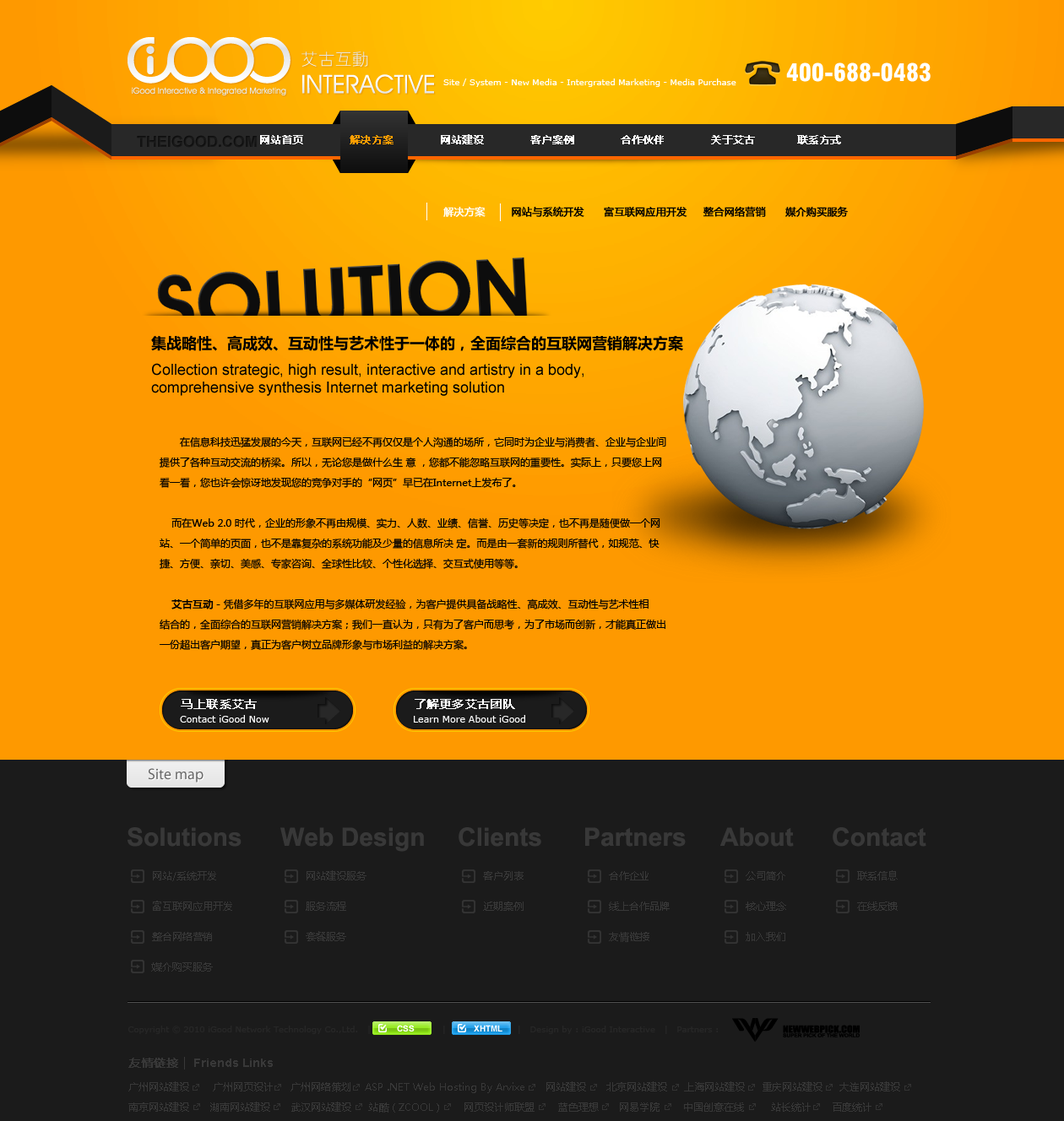
<style>
.page{position:relative;width:1064px;height:1121px;background:#1b1b1b}
.page>*{position:absolute;margin:0}
.t1{font:23.6px "Swiss721BT-BlackCondensed";color:#ffffff}
.t2{font:8.4px "Verdana";color:#ffffff}
.t3{font:10.1px "MicrosoftYaHei";color:#ffffff;font-weight:bold}
.t4{font:10.1px "MicrosoftYaHei";color:#ff9e01;font-weight:bold}
.t5{font:10.1px "MicrosoftYaHei";color:#000000;font-weight:bold}
.t6{font:10.1px/20.3px "MicrosoftYaHei";color:#000000}
.t7{font:10.1px/20.3px "SimSun";color:#000000}
.t8{font:10.1px/20.3px "MicrosoftYaHei";color:#000000;font-weight:bold}
.t9{font:11.8px "MicrosoftYaHei";color:#ffffff;font-weight:bold}
.t10{font:9.3px "Verdana";color:#ffffff}
.t11{font:25.3px "Arial-BoldMT";color:#383838}
.t12{font:10.1px/30.4px "MicrosoftYaHei";color:#383838}
.t13{font:11.8px "MicrosoftYaHei";color:#383838;font-weight:bold}
.t14{font:11.8px "MicrosoftYaHei";color:#383838}
.t15{font:11.8px "Arial-BoldMT";color:#383838}
.t16{font:10.1px/20.3px "MicrosoftYaHei";color:#383838}
</style>
<div class="page">
<p class="t1" style="left:786px;top:62px;width:144px;height:20px">400-688-0483</p>
<p class="t2" style="left:443px;top:79px;width:293px;height:8px">Site / System - New Media - Intergrated Marketing - Media Purchase</p>
<p class="t3" style="left:260px;top:134px;width:581px;height:10px">网站首页           <span class="t4">解决方案 </span>          网站建设           客户案例           合作伙伴           关于艾古          联系方式</p>
<p class="t5" style="left:443px;top:206px;width:405px;height:11px"><span class="t3">解决方案        </span>网站与系统开发      富互联网应用开发     整合网络营销      媒介购买服务</p>
<p class="t6" style="left:160px;top:436px;width:506px;height:214px"><span class="t7">    </span>在信息科技迅猛发展的今天，互联网已经不再仅仅是个人沟通的场所，它同时为企业与消费者、企业与企业间<br>提供了各种互动交流的桥梁。所以，无论您是做什么生 意 ，您都不能忽略互联网的重要性。实际上，只要您上网<br>看一看，您也许会惊讶地发现您的竞争对手的“网页”早已在Internet上发布了。<br><br>    而在Web 2.0 时代，企业的形象不再由规模、实力、人数、业绩、信誉、历史等决定，也不再是随便做一个网<br>站、一个简单的页面，也不是靠复杂的系统功能及少量的信息所决 定。而是由一套新的规则所替代，如规范、快<br>捷、方便、亲切、美感、专家咨询、全球性比较、个性化选择、交互式使用等等。<br><br>    <span class="t8">艾古互动</span>－凭借多年的互联网应用与多媒体研发经验，为客户提供具备战略性、高成效、互动性与艺术性相<br>结合的，全面综合的互联网营销解决方案；我们一直认为，只有为了客户而思考，为了市场而创新，才能真正做出<br>一份超出客户期望，真正为客户树立品牌形象与市场利益的解决方案。</p>
<p class="t9" style="left:181px;top:699px;width:76px;height:10px">马上联系艾古</p>
<p class="t9" style="left:414px;top:699px;width:101px;height:10px">了解更多艾古团队</p>
<p class="t10" style="left:180px;top:715px;width:89px;height:8px">Contact iGood Now</p>
<p class="t10" style="left:414px;top:715px;width:111px;height:8px">Learn More About iGood</p>
<p class="t11" style="left:127px;top:827px;width:114px;height:20px">Solutions</p>
<p class="t11" style="left:280px;top:827px;width:144px;height:25px">Web Design</p>
<p class="t11" style="left:458px;top:827px;width:83px;height:20px">Clients</p>
<p class="t11" style="left:585px;top:827px;width:100px;height:20px">Partners</p>
<p class="t11" style="left:720px;top:827px;width:74px;height:20px">About</p>
<p class="t11" style="left:832px;top:827px;width:94px;height:20px">Contact</p>
<p class="t12" style="left:151px;top:871px;width:81px;height:101px">网站/系统开发 <br>富互联网应用开发 <br>整合网络营销 <br>媒介购买服务</p>
<p class="t12" style="left:306px;top:870px;width:60px;height:71px">网站建设服务 <br>服务流程 <br>套餐服务</p>
<p class="t12" style="left:483px;top:871px;width:40px;height:40px">客户列表 <br>近期案例</p>
<p class="t12" style="left:609px;top:871px;width:60px;height:71px">合作企业 <br>线上合作品牌 <br>友情链接</p>
<p class="t12" style="left:745px;top:871px;width:41px;height:70px">公司简介 <br>核心理念 <br>加入我们</p>
<p class="t12" style="left:857px;top:870px;width:40px;height:41px">联系信息 <br>在线反馈</p>
<p class="t13" style="left:128px;top:1057px;width:57px;height:13px">友情链接 <span class="t14">|</span></p>
<p class="t15" style="left:194px;top:1059px;width:79px;height:8px">Friends Links</p>
<p class="t16" style="left:128px;top:1081px;width:772px;height:32px">广州网站建设       广州网页设计     广州网络策划    ASP .NET Web Hosting By Arvixe      网站建设      北京网站建设     上海网站建设     重庆网站建设     大连网站建设 <br>南京网站建设      湖南网站建设      武汉网站建设     站酷（ZCOOL）      网页设计师联盟       蓝色理想      网易学院       中国创意在线        站长统计      百度统计</p>
</div>
